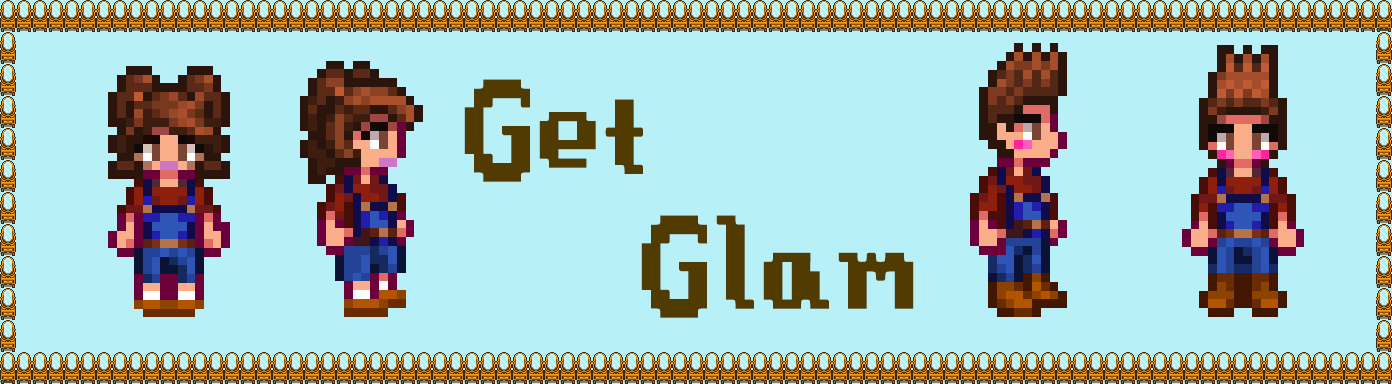
<style>
.page{position:relative;width:1392px;height:384px;background:#b7f0f7}
.page>*{position:absolute;margin:0}
.t1{font:160px "Stardew-Valley";color:#523b00}
</style>
<div class="page">
<p class="t1" style="left:464px;top:79px;width:179px;height:103px">Get</p>
<p class="t1" style="left:641px;top:215px;width:273px;height:103px">Glam</p>
</div>
